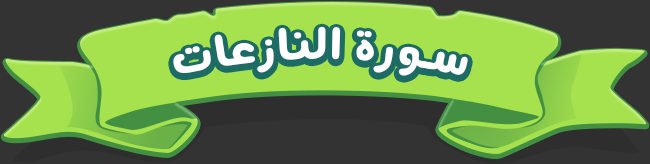
<style>
.page{position:relative;width:650px;height:164px;background:#a5e24d}
.page>*{position:absolute;margin:0}
.t1{font:48px "ANegaar-Bold";letter-spacing:0.05em;color:#ffffff}
</style>
<div class="page">
<p class="t1" style="left:173px;top:26px;width:295px;height:50px">سورة النازعات</p>
</div>
